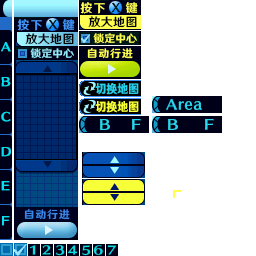
<style>
.page{position:relative;width:256px;height:256px;background:#ffffff}
.page>*{position:absolute;margin:0}
.t1{font:12px "HYWenHei-HEW";letter-spacing:0.1em;color:#ffff52}
.t2{font:12px "HYWenHei-HEW";letter-spacing:0.025em;color:#000000}
.t3{font:12px "HYWenHei-HEW";letter-spacing:0.1em;color:#4294f7}
.t4{font:10.7px "HYWenHei-HEW";letter-spacing:0.025em;color:#ffff52}
.t5{font:10.7px "HYWenHei-HEW";letter-spacing:0.025em;color:#94e7f7}
.t6{font:10.7px "HYWenHei-HEW";letter-spacing:0.1em;color:#ffff52}
.t7{font:12px "HYWenHei-HEW";letter-spacing:0.025em;color:#29cee7;scale:0.89 1}
.t8{font:12px "HYWenHei-HEW";letter-spacing:0.025em;color:#f7ff39;scale:0.89 1}
.t9{font:10.7px "HYWenHei-HEW";letter-spacing:0.1em;color:#3984e7}
</style>
<div class="page">
<p class="t1" style="left:80px;top:2px;width:58px;height:12px">按下    键</p>
<p class="t2" style="left:88px;top:16px;width:49px;height:12px">放大地图</p>
<p class="t3" style="left:17px;top:19px;width:58px;height:12px">按下    键</p>
<p class="t2" style="left:25px;top:33px;width:49px;height:12px">放大地图</p>
<p class="t4" style="left:93px;top:33px;width:44px;height:11px">锁定中心</p>
<p class="t5" style="left:30px;top:48px;width:44px;height:11px">锁定中心</p>
<p class="t6" style="left:87px;top:48px;width:46px;height:11px">自动行进</p>
<p class="t7" style="left:95px;top:83px;width:44px;height:12px">切换地图</p>
<p class="t8" style="left:95px;top:101px;width:44px;height:12px">切换地图</p>
<p class="t9" style="left:24px;top:209px;width:46px;height:11px">自动行进</p>
</div>
